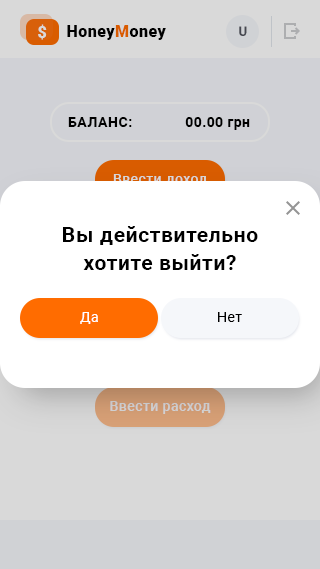
<style>
.page{position:relative;width:320px;height:569px;background:#ffffff}
.page>*{position:absolute;margin:0}
.t1{font:16px "Roboto-Black";letter-spacing:0.03em;color:#d9d9d9}
.t2{font:16px "Roboto-Black";letter-spacing:0.03em;color:#000000}
.t3{font:16px "Roboto-Black";letter-spacing:0.03em;color:#ff6c00}
.t4{font:13px "Roboto-Medium";letter-spacing:0.035em;color:#52555f}
.t5{font:14px "Roboto-Bold";letter-spacing:0.04em;color:#000000;text-transform:uppercase}
.t6{font:14px "Roboto-Bold";letter-spacing:0.03em;color:#000000}
.t7{font:14px "Roboto-Medium";letter-spacing:0.03em}
.t8{font:21px/28px "Roboto-Bold";letter-spacing:0.03em;color:#000000}
.t9{font:14px "Roboto-Regular";letter-spacing:0.03em;color:#ffffff}
.t10{font:14px "Roboto-Regular";letter-spacing:0.03em;color:#000000}
.t11{font:14px "Roboto-Medium";letter-spacing:0.03em;color:#cccccc}
</style>
<div class="page">
<p class="t1" style="left:38px;top:24px;width:9px;height:16px">$</p>
<p class="t2" style="left:67px;top:25px;width:99px;height:15px">Honey<span class="t3">M</span>oney</p>
<p class="t4" style="left:239px;top:26px;width:8px;height:10px">U</p>
<p class="t5" style="left:68px;top:117px;width:64px;height:10px">баланс:</p>
<p class="t6" style="left:185px;top:117px;width:65px;height:13px">00.00 грн</p>
<p class="t7" style="left:113px;top:174px;width:94px;height:12px">Ввести доход</p>
<p class="t8" style="left:63px;top:226px;width:195px;height:44px;text-align:center">Вы действительно хотите выйти?</p>
<p class="t9" style="left:80px;top:312px;width:18px;height:12px">Да</p>
<p class="t10" style="left:218px;top:312px;width:24px;height:10px">Нет</p>
<p class="t11" style="left:110px;top:401px;width:101px;height:13px">Ввести расход</p>
</div>
